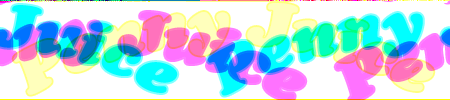
<style>
.page{position:relative;width:450px;height:100px;background:#ffffff}
.page>*{position:absolute;margin:0}
.t1{font:60px "CooperBlackStd-Italic"}
</style>
<div class="page">
<p class="t1" style="left:13px;top:4px;width:421px;height:92px">Penny Juice</p>
</div>
